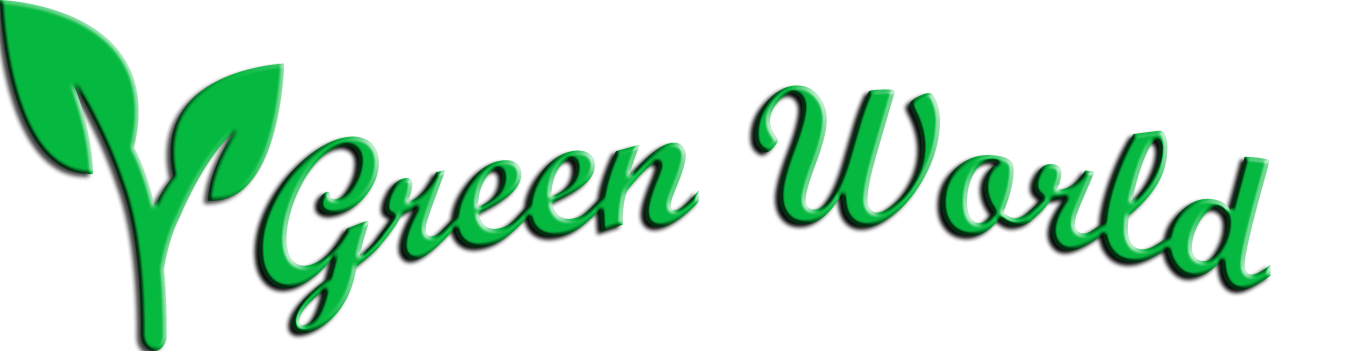
<style>
.page{position:relative;width:1372px;height:351px;background:#ffffff}
.page>*{position:absolute;margin:0}
.t1{font:196.4px "ScriptMTBold"}
</style>
<div class="page">
<p class="t1" style="left:258px;top:85px;width:1013px;height:248px;rotate:1deg">Green World</p>
</div>
